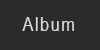
<style>
.page{position:relative;width:100px;height:50px;background:#2b2b2b}
.page>*{position:absolute;margin:0}
.t1{font:20px "ArialNarrow";letter-spacing:0.075em;color:#d9d9d8}
</style>
<div class="page">
<p class="t1" style="left:22px;top:17px;width:52px;height:14px">Album</p>
</div>
